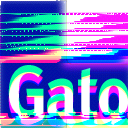
<style>
.page{position:relative;width:128px;height:128px}
.page>*{position:absolute;margin:0}
.t1{font:73.6px "Meta-Bold";scale:0.87 1}
</style>
<div class="page">
<p class="t1" style="left:8px;top:74px;width:121px;height:54px">Gato</p>
</div>
